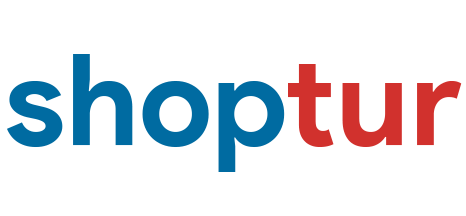
<style>
.page{position:relative;width:466px;height:216px;background:#ffffff}
.page>*{position:absolute;margin:0}
.t1{font:127.4px "ProductSans-Bold";color:#006ba1}
.t2{font:127.4px "ProductSans-Bold";color:#d2312d}
</style>
<div class="page">
<p class="t1" style="left:7px;top:54px;width:455px;height:118px">shop<span class="t2">tur</span></p>
</div>
